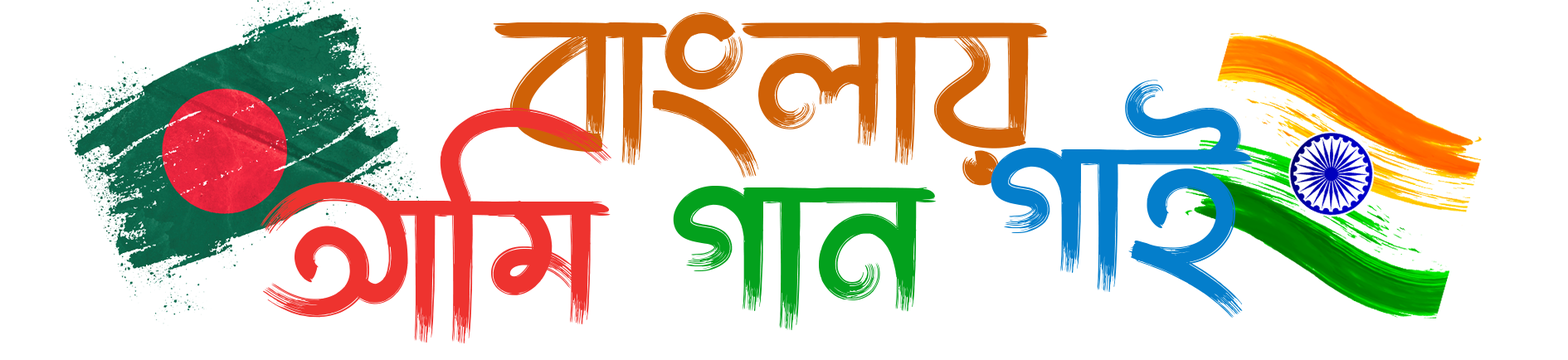
<style>
.page{position:relative;width:1568px;height:360px;background:#ffffff}
.page>*{position:absolute;margin:0}
.t1{font:207.4px "LiAlinurOisheeB2Unicode";color:#cf6107}
.t2{font:207.4px "LiAlinurOisheeB2Unicode";color:#047ecb}
.t3{font:207.4px "LiAlinurOisheeB2Unicode";color:#ee332f}
.t4{font:207.4px "LiAlinurOisheeB2Unicode";color:#03a11d}
</style>
<div class="page">
<p class="t1" style="left:493px;top:12px;width:555px;height:174px">বাংলায়</p>
<p class="t2" style="left:991px;top:80px;width:262px;height:239px">গাই</p>
<p class="t3" style="left:260px;top:108px;width:351px;height:235px">আমি</p>
<p class="t4" style="left:673px;top:186px;width:264px;height:144px">গান</p>
</div>
